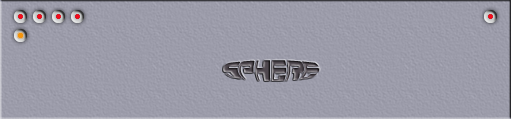
<style>
.page{position:relative;width:511px;height:119px}
.page>*{position:absolute;margin:0}
.t1{font:24px "Drosselmeyer"}
</style>
<div class="page">
<p class="t1" style="left:223px;top:60px;width:97px;height:21px">SPHERE</p>
</div>
